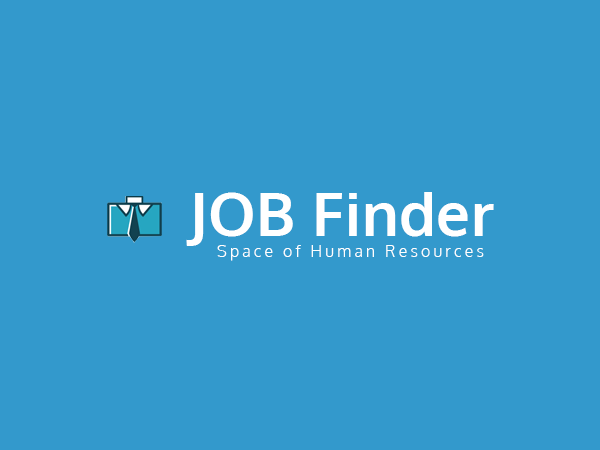
<style>
.page{position:relative;width:600px;height:450px;background:#3399cc}
.page>*{position:absolute;margin:0}
.t1{font:60px "Oxygen-Bold";letter-spacing:0.01em;color:#ffffff}
.t2{font:16px "Oxygen-Light";letter-spacing:0.2em;color:#ffffff}
</style>
<div class="page">
<p class="t1" style="left:186px;top:192px;width:308px;height:54px">JOB Finder</p>
<p class="t2" style="left:217px;top:245px;width:267px;height:16px">Space of Human Resources</p>
</div>
